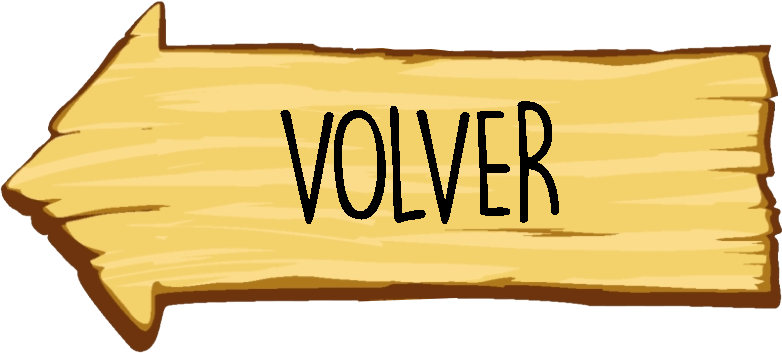
<style>
.page{position:relative;width:782px;height:353px;background:#ffffff}
.page>*{position:absolute;margin:0}
.t1{font:150px "DKLemonYellowSun";letter-spacing:-0.05em;color:#000000;text-transform:uppercase}
</style>
<div class="page">
<p class="t1" style="left:280px;top:101px;width:279px;height:123px">volver</p>
</div>
